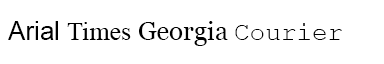
<style>
.page{position:relative;width:384px;height:64px;background:#ffffff}
.page>*{position:absolute;margin:0}
.t1{font:26px "Georgia";color:#000000}
.t2{font:26px "ArialMT";color:#000000}
.t3{font:26px "TimesNewRomanPSMT";color:#000000}
.t4{font:26px "CourierNewPSMT";color:#000000}
</style>
<div class="page">
<p class="t1" style="left:8px;top:21px;width:334px;height:25px"><span class="t2">Arial </span><span class="t3">Times </span>Georgia <span class="t4">Courier</span></p>
</div>
